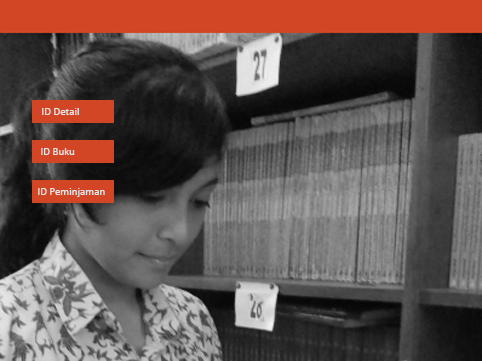
<style>
.page{position:relative;width:482px;height:361px}
.page>*{position:absolute;margin:0}
.t1{font:11px "Calibri";color:#e5e5e5}
</style>
<div class="page">
<p class="t1" style="left:42px;top:108px;width:37px;height:7px">ID Detail</p>
<p class="t1" style="left:41px;top:148px;width:34px;height:7px">ID Buku</p>
<p class="t1" style="left:38px;top:188px;width:67px;height:9px">ID Peminjaman</p>
</div>
